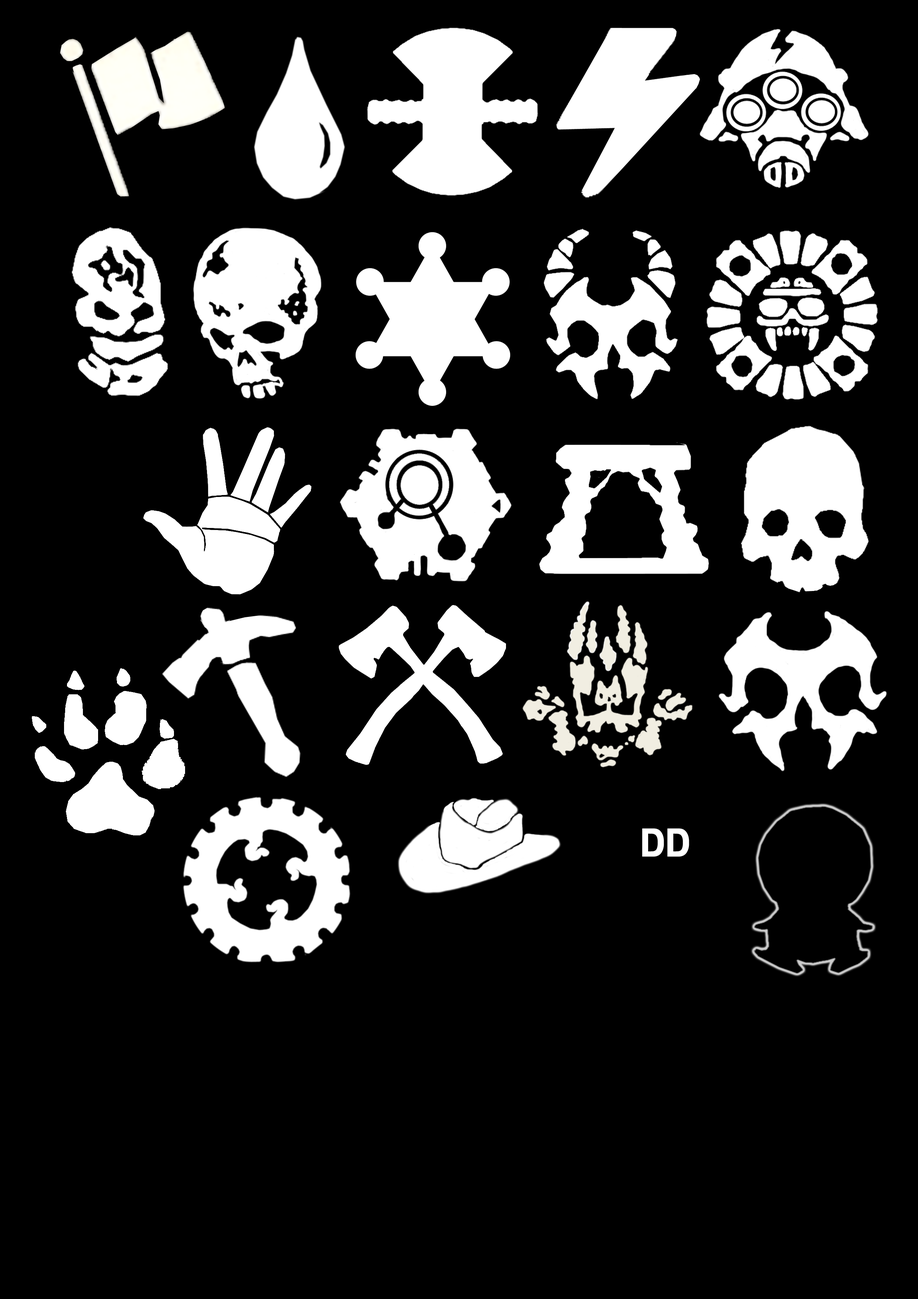
<style>
.page{position:relative;width:918px;height:1299px;background:#000000}
.page>*{position:absolute;margin:0}
.t1{font:38.6px "Arial-BoldMT";letter-spacing:-0.025em;color:#ffffff;font-variant:small-caps;font-weight:bold;scale:0.9 1}
</style>
<div class="page">
<p class="t1" style="left:642px;top:828px;width:47px;height:29px">DD</p>
</div>
